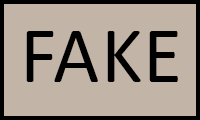
<style>
.page{position:relative;width:200px;height:120px;background:#c2b4a7}
.page>*{position:absolute;margin:0}
.t1{font:80.5px "Calibri";letter-spacing:0.01em;color:#000000}
</style>
<div class="page">
<p class="t1" style="left:26px;top:31px;width:152px;height:51px">FAKE</p>
</div>
